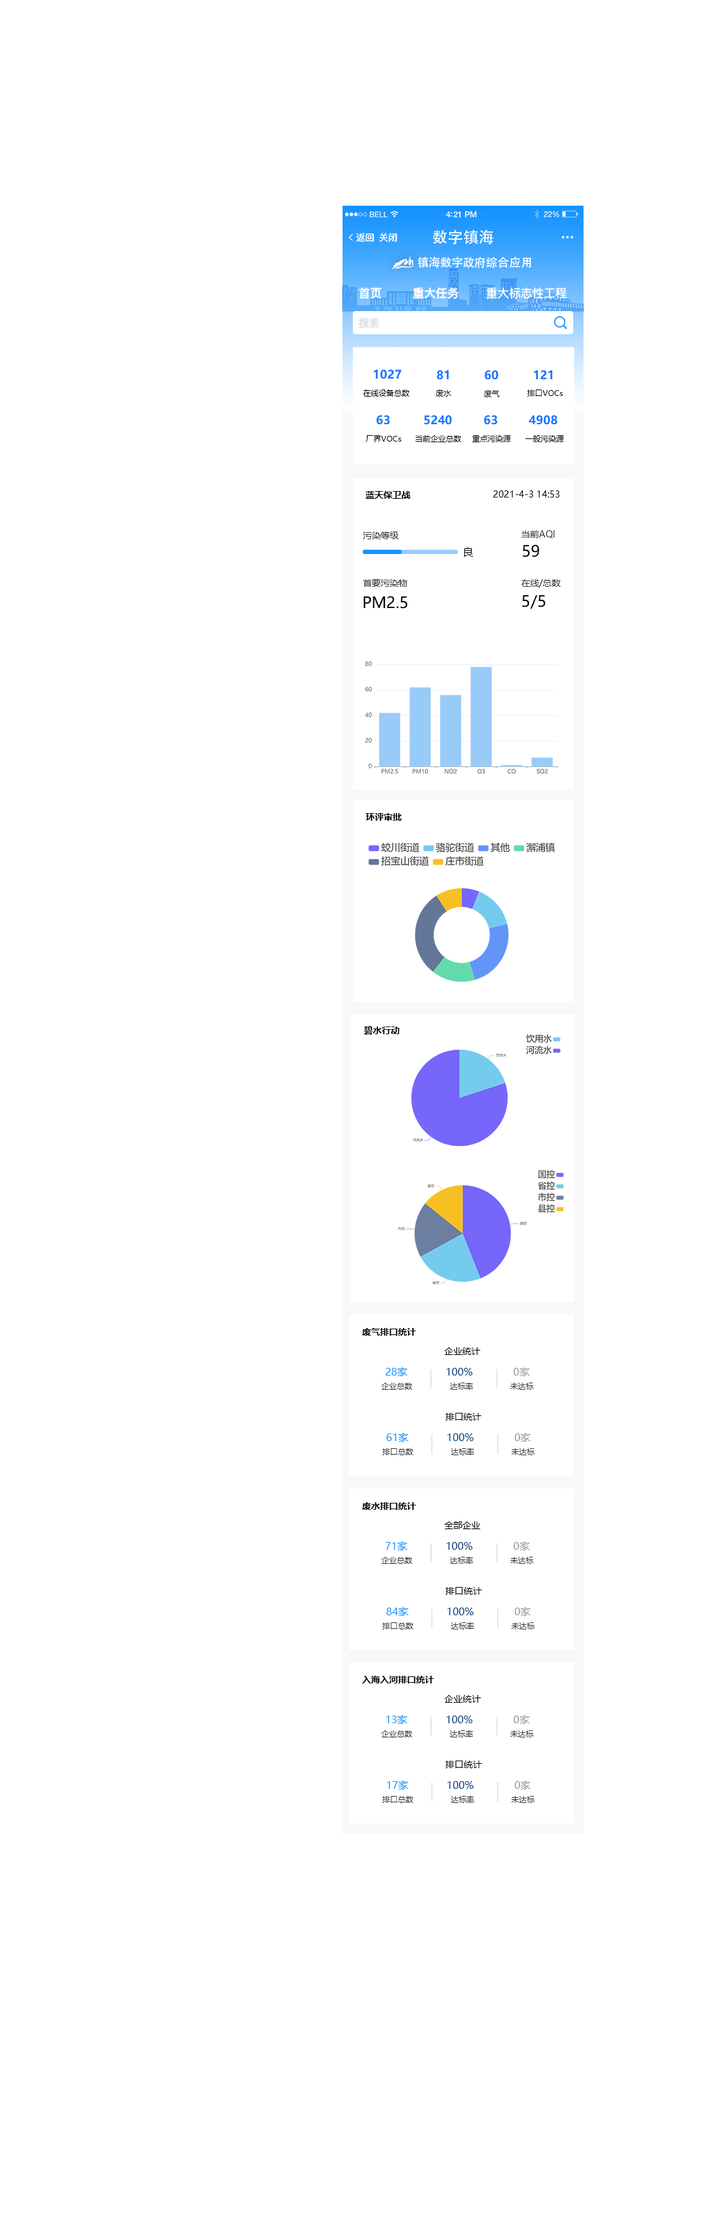
<style>
.page{position:relative;width:723px;height:2224px;background:#ffffff}
.page>*{position:absolute;margin:0}
.t1{font:9px "PingFangSC-Regular";color:#ffffff}
.t2{font:15.4px "AdobeHeitiStd-Regular";color:#ffffff}
.t3{font:11.6px "AdobeHeitiStd-Regular";color:#ffffff}
.t4{font:11.6px "PingFangSC-Medium";color:#ffffff}
.t5{font:11.6px "PingFangSC-Regular";color:#ffffff}
.t6{font:10.3px "PingFangSC-Regular";color:#dcddde}
.t7{font:11.6px "MicrosoftYaHei-Bold";color:#1677ff}
.t8{font:7.7px "MicrosoftYaHei";color:#000000}
.t9{font:9px "MicrosoftYaHei-Bold";color:#000000}
.t10{font:9px "MicrosoftYaHei";color:#000000}
.t11{font:9px "MicrosoftYaHei";color:#333333}
.t12{font:15.4px "MicrosoftYaHei";color:#010101}
.t13{font:10.3px "MicrosoftYaHei";color:#000000}
.t14{font:8.9px "MicrosoftYaHei";color:#333333}
.t15{font:15.4px "MicrosoftYaHei";color:#000000}
.t16{font:10.3px "MicrosoftYaHei";color:#1492ff}
.t17{font:10.3px "MicrosoftYaHei";color:#003e78}
.t18{font:10.3px "MicrosoftYaHei";color:#999999}
.t19{font:7.7px "MicrosoftYaHei";color:#333333}
.t20{font:9.2px "MicrosoftYaHei";color:#000000}
</style>
<div class="page">
<p class="t1" style="left:355px;top:233px;width:19px;height:9px">返回</p>
<p class="t1" style="left:379px;top:233px;width:18px;height:9px">关闭</p>
<p class="t2" style="left:433px;top:229px;width:61px;height:16px">数字镇海</p>
<p class="t3" style="left:418px;top:256px;width:114px;height:12px">镇海数字政府综合应用</p>
<p class="t4" style="left:358px;top:287px;width:210px;height:12px">首页        重大任务<span class="t5">       重大标志性工程</span></p>
<p class="t6" style="left:359px;top:318px;width:21px;height:10px">搜索</p>
<p class="t7" style="left:373px;top:370px;width:29px;height:9px">1027</p>
<p class="t7" style="left:436px;top:370px;width:13px;height:10px">81</p>
<p class="t7" style="left:485px;top:370px;width:14px;height:10px">60</p>
<p class="t7" style="left:534px;top:370px;width:19px;height:9px">121</p>
<p class="t8" style="left:363px;top:390px;width:46px;height:7px">在线设备总数</p>
<p class="t8" style="left:436px;top:390px;width:15px;height:7px">废水</p>
<p class="t8" style="left:527px;top:390px;width:36px;height:7px">排口VOCs</p>
<p class="t8" style="left:484px;top:390px;width:15px;height:7px">废气</p>
<p class="t7" style="left:377px;top:415px;width:13px;height:10px">63</p>
<p class="t7" style="left:424px;top:415px;width:28px;height:10px">5240</p>
<p class="t7" style="left:484px;top:415px;width:14px;height:10px">63</p>
<p class="t7" style="left:529px;top:415px;width:29px;height:10px">4908</p>
<p class="t8" style="left:366px;top:435px;width:36px;height:7px">厂界VOCs</p>
<p class="t8" style="left:415px;top:435px;width:47px;height:7px">当前企业总数</p>
<p class="t8" style="left:472px;top:435px;width:39px;height:7px">重点污染源</p>
<p class="t8" style="left:525px;top:435px;width:39px;height:7px">一般污染源</p>
<p class="t9" style="left:365px;top:491px;width:46px;height:8px">蓝天保卫战</p>
<p class="t10" style="left:493px;top:490px;width:67px;height:8px">2021-4-3 14:53</p>
<p class="t11" style="left:363px;top:531px;width:36px;height:8px">污染等级</p>
<p class="t11" style="left:521px;top:530px;width:34px;height:8px">当前AQI</p>
<p class="t12" style="left:523px;top:544px;width:16px;height:13px">59</p>
<p class="t13" style="left:463px;top:547px;width:10px;height:10px">良</p>
<p class="t14" style="left:363px;top:579px;width:45px;height:8px">首要污染物</p>
<p class="t14" style="left:521px;top:579px;width:40px;height:9px">在线/总数</p>
<p class="t15" style="left:364px;top:596px;width:44px;height:13px">PM2.5</p>
<p class="t12" style="left:523px;top:595px;width:23px;height:14px">5/5</p>
<p class="t9" style="left:366px;top:813px;width:36px;height:8px">环评审批</p>
<p class="t9" style="left:364px;top:1026px;width:36px;height:9px">碧水行动</p>
<p class="t9" style="left:362px;top:1328px;width:55px;height:8px">废气排口统计</p>
<p class="t10" style="left:444px;top:1347px;width:37px;height:8px">企业统计</p>
<p class="t16" style="left:386px;top:1367px;width:22px;height:9px">28家</p>
<p class="t17" style="left:447px;top:1368px;width:25px;height:8px">100%</p>
<p class="t18" style="left:514px;top:1367px;width:16px;height:9px">0家</p>
<p class="t19" style="left:381px;top:1383px;width:32px;height:7px">企业总数</p>
<p class="t19" style="left:450px;top:1383px;width:23px;height:7px">达标率</p>
<p class="t19" style="left:510px;top:1383px;width:24px;height:7px">未达标</p>
<p class="t10" style="left:445px;top:1413px;width:36px;height:8px">排口统计</p>
<p class="t16" style="left:386px;top:1433px;width:23px;height:9px">61家</p>
<p class="t17" style="left:447px;top:1434px;width:27px;height:7px">100%</p>
<p class="t18" style="left:515px;top:1433px;width:16px;height:9px">0家</p>
<p class="t19" style="left:382px;top:1448px;width:31px;height:7px">排口总数</p>
<p class="t19" style="left:451px;top:1448px;width:23px;height:7px">达标率</p>
<p class="t19" style="left:512px;top:1448px;width:23px;height:7px">未达标</p>
<p class="t9" style="left:362px;top:1502px;width:55px;height:8px">废水排口统计</p>
<p class="t10" style="left:444px;top:1522px;width:37px;height:7px">全部企业</p>
<p class="t16" style="left:386px;top:1542px;width:22px;height:9px">71家</p>
<p class="t18" style="left:514px;top:1542px;width:16px;height:9px">0家</p>
<p class="t17" style="left:447px;top:1542px;width:25px;height:8px">100%</p>
<p class="t19" style="left:381px;top:1557px;width:32px;height:7px">企业总数</p>
<p class="t19" style="left:450px;top:1557px;width:23px;height:7px">达标率</p>
<p class="t19" style="left:510px;top:1557px;width:24px;height:7px">未达标</p>
<p class="t20" style="left:445px;top:1587px;width:37px;height:8px">排口统计</p>
<p class="t16" style="left:386px;top:1607px;width:23px;height:9px">84家</p>
<p class="t17" style="left:447px;top:1608px;width:27px;height:7px">100%</p>
<p class="t18" style="left:515px;top:1607px;width:16px;height:9px">0家</p>
<p class="t19" style="left:382px;top:1623px;width:31px;height:7px">排口总数</p>
<p class="t19" style="left:451px;top:1623px;width:23px;height:7px">达标率</p>
<p class="t19" style="left:512px;top:1623px;width:23px;height:7px">未达标</p>
<p class="t9" style="left:362px;top:1676px;width:73px;height:8px">入海入河排口统计</p>
<p class="t20" style="left:444px;top:1695px;width:37px;height:8px">企业统计</p>
<p class="t16" style="left:386px;top:1715px;width:22px;height:9px">13家</p>
<p class="t17" style="left:447px;top:1716px;width:25px;height:7px">100%</p>
<p class="t18" style="left:514px;top:1715px;width:16px;height:9px">0家</p>
<p class="t19" style="left:381px;top:1731px;width:32px;height:7px">企业总数</p>
<p class="t19" style="left:450px;top:1731px;width:23px;height:7px">达标率</p>
<p class="t19" style="left:510px;top:1731px;width:24px;height:7px">未达标</p>
<p class="t20" style="left:445px;top:1761px;width:37px;height:7px">排口统计</p>
<p class="t16" style="left:387px;top:1781px;width:22px;height:9px">17家</p>
<p class="t17" style="left:447px;top:1781px;width:27px;height:8px">100%</p>
<p class="t18" style="left:515px;top:1781px;width:16px;height:9px">0家</p>
<p class="t19" style="left:382px;top:1796px;width:31px;height:7px">排口总数</p>
<p class="t19" style="left:451px;top:1796px;width:23px;height:7px">达标率</p>
<p class="t19" style="left:512px;top:1796px;width:23px;height:7px">未达标</p>
</div>
